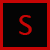
<style>
.page{position:relative;width:50px;height:50px;background:#040404}
.page>*{position:absolute;margin:0}
.t1{font:27.6px "LucidaGrande";color:#c70505}
</style>
<div class="page">
<p class="t1" style="left:19px;top:15px;width:13px;height:20px">S</p>
</div>
